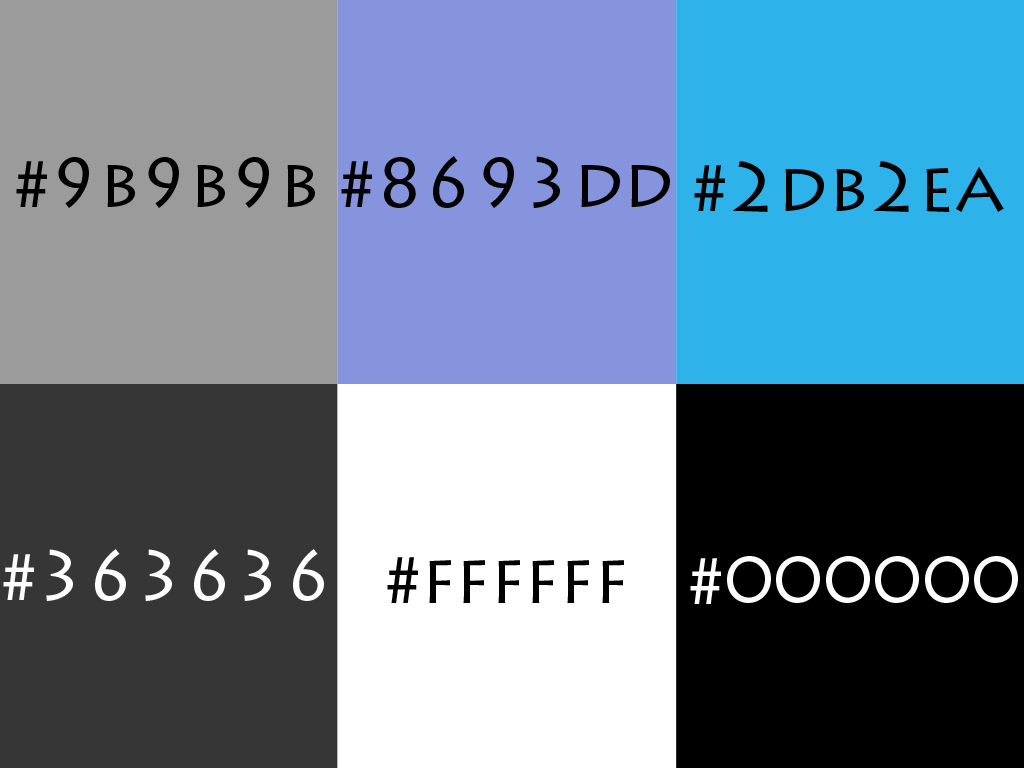
<style>
.page{position:relative;width:1024px;height:768px}
.page>*{position:absolute;margin:0}
.t1{font:70px "LithosPro-Regular";color:#000000}
.t2{font:70px "LithosPro-Regular";color:#ffffff}
</style>
<div class="page">
<p class="t1" style="left:16px;top:157px;width:299px;height:51px">#9b9b9b</p>
<p class="t1" style="left:341px;top:156px;width:329px;height:52px">#8693dd</p>
<p class="t1" style="left:694px;top:161px;width:310px;height:51px">#2db2ea</p>
<p class="t2" style="left:3px;top:549px;width:321px;height:52px">#363636</p>
<p class="t1" style="left:387px;top:557px;width:237px;height:46px">#ffffff</p>
<p class="t2" style="left:690px;top:556px;width:328px;height:48px">#000000</p>
</div>
